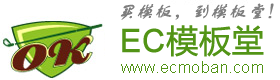
<style>
.page{position:relative;width:280px;height:80px;background:#ffffff}
.page>*{position:absolute;margin:0}
.t1{font:18px "FZSTK--GBK1-0";color:#7e7e7e;font-weight:bold;font-style:italic}
.t2{font:32px "MicrosoftYaHei";color:#529416;font-weight:bold}
.t3{font:32px "ArialMT";color:#529416;font-weight:bold}
.t4{font:16px "ArialMT";letter-spacing:0.03em;color:#529416}
</style>
<div class="page">
<p class="t1" style="left:120px;top:3px;width:154px;height:17px">买模板，到模板堂！</p>
<p class="t2" style="left:122px;top:25px;width:142px;height:32px"><span class="t3">EC</span>模板堂</p>
<p class="t4" style="left:121px;top:61px;width:142px;height:12px">www.ecmoban.com</p>
</div>
